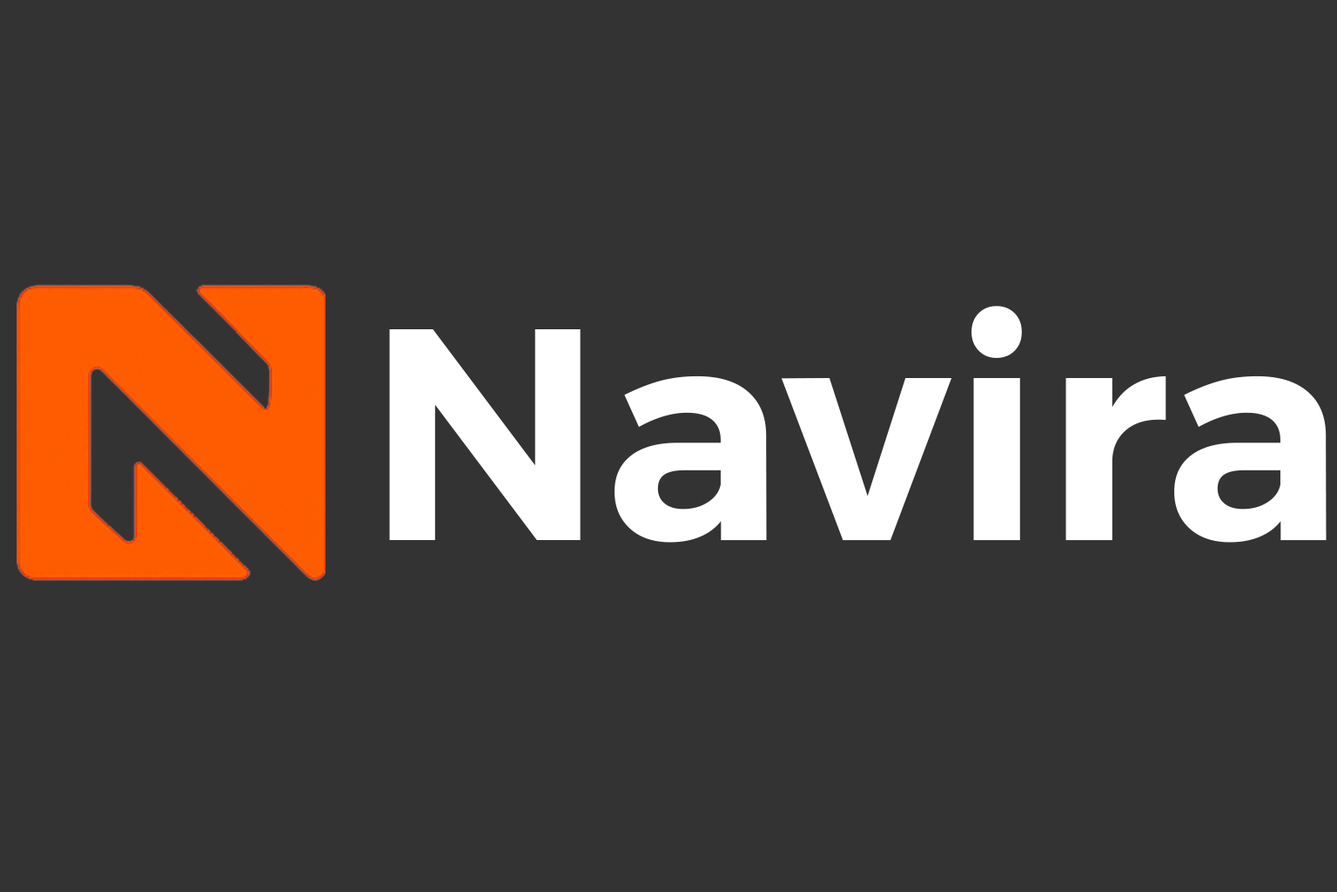
<style>
.page{position:relative;width:1337px;height:892px;background:#333333}
.page>*{position:absolute;margin:0}
.t1{font:301px "Montserrat-SemiBold";letter-spacing:0.005em;color:#ffffff}
</style>
<div class="page">
<p class="t1" style="left:389px;top:306px;width:938px;height:236px">Navira</p>
</div>
